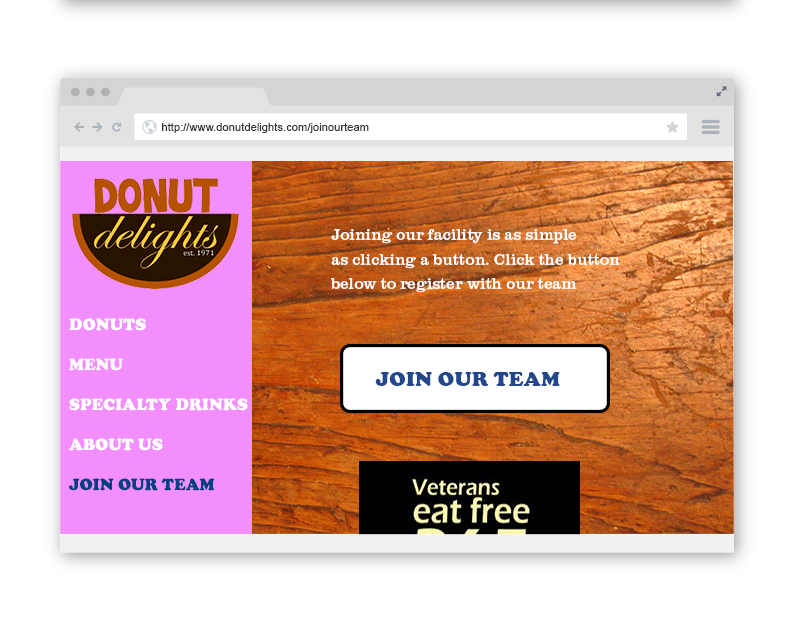
<style>
.page{position:relative;width:794px;height:626px;background:#ffffff}
.page>*{position:absolute;margin:0}
.t1{font:11.2px "ArialMT";color:#333333}
.t2{font:16px/24.7px "ClarendonURW-Reg";color:#ffffff}
.t3{font:16.9px/40px "CooperBlack";color:#ffffff}
.t4{font:16.9px/40px "CooperBlack";color:#fbfbfb}
.t5{font:16.9px/40px "CooperBlack";color:#004081}
.t6{font:21.3px "CooperBlack";color:#24478b}
</style>
<div class="page">
<p class="t1" style="left:162px;top:123px;width:207px;height:10px">http://www.donutdelights.com/joinourteam</p>
<p class="t2" style="left:331px;top:229px;width:289px;height:64px">Joining our facility is as simple <br>as clicking a button. Click the button<br>below to register with our team</p>
<p class="t3" style="left:69px;top:318px;width:179px;height:173px">DONUTS <br><span class="t4">MENU<br></span>SPECIALTY DRINKS<br>ABOUT US<br><span class="t5">JOIN OUR TEAM</span></p>
<p class="t6" style="left:375px;top:372px;width:185px;height:14px">JOIN OUR TEAM</p>
</div>
